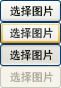
<style>
.page{position:relative;width:61px;height:88px}
.page>*{position:absolute;margin:0}
.t1{font:11px "SimHei";color:#000000}
.t2{font:11px "SimHei";color:#242423}
.t3{font:11px "SimHei";color:#aca899}
</style>
<div class="page">
<p class="t1" style="left:10px;top:5px;width:43px;height:12px">选择图片</p>
<p class="t2" style="left:10px;top:27px;width:43px;height:12px">选择图片</p>
<p class="t1" style="left:10px;top:49px;width:43px;height:12px">选择图片</p>
<p class="t3" style="left:10px;top:71px;width:43px;height:12px">选择图片</p>
</div>
